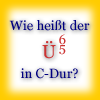
<style>
.page{position:relative;width:100px;height:100px}
.page>*{position:absolute;margin:0}
.t1{font:13.3px "Georgia";color:#000080}
.t2{font:18.7px "Georgia";color:#cc3333}
.t3{font:13.3px "Georgia";color:#cc3333}
</style>
<div class="page">
<p class="t1" style="left:9px;top:20px;width:81px;height:59px;text-align:center">Wie heißt der<br><br><br>in C-Dur?</p>
<p class="t2" style="left:42px;top:41px;width:14px;height:18px">Ü</p>
<p class="t3" style="left:59px;top:34px;width:7px;height:11px">6</p>
<p class="t3" style="left:59px;top:45px;width:7px;height:10px">5</p>
</div>
